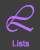
<style>
.page{position:relative;width:40px;height:50px;background:#3e3e3e}
.page>*{position:absolute;margin:0}
.t1{font:37.3px "Vivaldii";color:#bf71fb;scale:0.86 1}
.t2{font:8.3px "ArialMT";color:#bf71fb}
</style>
<div class="page">
<p class="t1" style="left:6px;top:5px;width:29px;height:27px">L</p>
<p class="t2" style="left:12px;top:40px;width:17px;height:7px">Lists</p>
</div>
